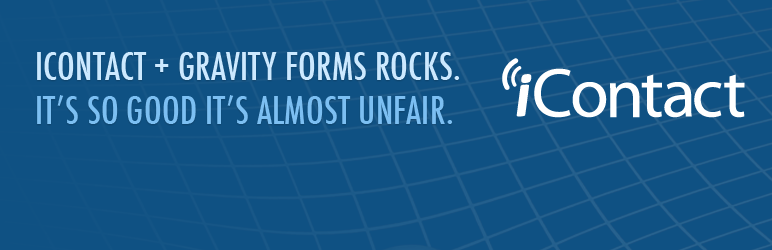
<style>
.page{position:relative;width:772px;height:250px;background:#0f5183}
.page>*{position:absolute;margin:0}
.t1{font:36.7px "Futura-CondensedMedium";letter-spacing:0.01em;color:#7cbff2;text-transform:uppercase}
.t2{font:36.7px "Futura-CondensedMedium";letter-spacing:0.01em;color:#cce9ff;text-transform:uppercase}
</style>
<div class="page">
<p class="t1" style="left:37px;top:52px;width:423px;height:72px"><span class="t2">icontact + Gravity forms rocks.<br></span>it’s so good it’s almost unfair.</p>
</div>
